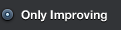
<style>
.page{position:relative;width:121px;height:30px;background:#323437}
.page>*{position:absolute;margin:0}
.t1{font:12px "HelveticaNeueBold";color:#ffffff}
</style>
<div class="page">
<p class="t1" style="left:21px;top:10px;width:86px;height:12px">Only Improving</p>
</div>
